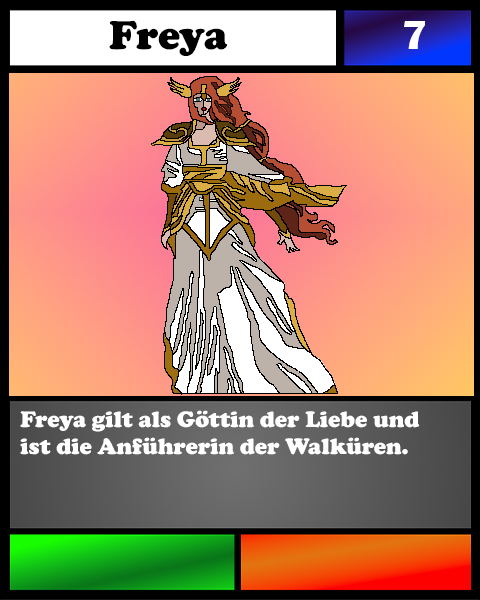
<style>
.page{position:relative;width:480px;height:600px}
.page>*{position:absolute;margin:0}
.t1{font:41.7px "Bauhaus93";color:#42667c}
.t2{font:41.7px "CooperBlack";color:#000000}
.t3{font:41.7px "BritannicBold";color:#ffffff}
.t4{font:23.1px "CooperBlack";color:#ffffff}
</style>
<div class="page">
<p class="t1" style="left:109px;top:20px;width:118px;height:36px;text-align:center"><span class="t2">Freya<br></span><br><br>dwadwawda</p>
<p class="t3" style="left:404px;top:21px;width:21px;height:28px">7</p>
<p class="t4" style="left:20px;top:410px;width:400px;height:45px">Freya gilt als Göttin der Liebe und <br>ist die Anführerin der Walküren.</p>
</div>
